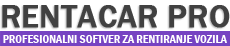
<style>
.page{position:relative;width:230px;height:46px;background:#ffffff}
.page>*{position:absolute;margin:0}
.t1{font:32px "FranklinGothic-Medium";color:#414141;font-weight:bold}
.t2{font:12px "FranklinGothic-DemiCond";color:#ffffff}
</style>
<div class="page">
<p class="t1" style="left:2px;top:5px;width:228px;height:23px">RENTACAR PRO</p>
<p class="t2" style="left:3px;top:35px;width:224px;height:8px">PROFESIONALNI SOFTVER ZA RENTIRANJE VOZILA</p>
</div>
